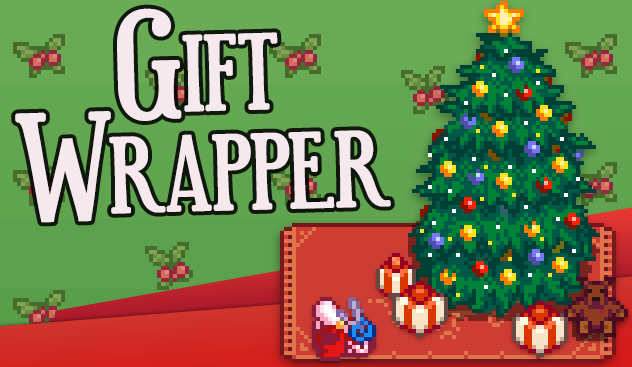
<style>
.page{position:relative;width:632px;height:367px}
.page>*{position:absolute;margin:0}
.t1{font:124px/100px "Euphorigenic";color:#f5e9ee;font-variant:small-caps;font-weight:bold;scale:1.1 1}
</style>
<div class="page">
<p class="t1" style="left:15px;top:8px;width:376px;height:215px;rotate:-2deg">Gift<br>Wrapper</p>
</div>
